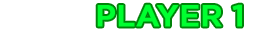
<style>
.page{position:relative;width:260px;height:32px;background:#ffffff}
.page>*{position:absolute;margin:0}
.t1{font:30px "Gotham-Medium";color:#00ff30;font-weight:bold}
</style>
<div class="page">
<p class="t1" style="left:97px;top:4px;width:145px;height:23px">PLAYER 1</p>
</div>
